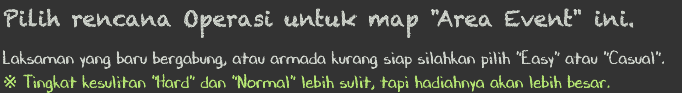
<style>
.page{position:relative;width:682px;height:93px;background:#333333}
.page>*{position:absolute;margin:0}
.t1{font:22px "Chalkduster";color:#d9ded6}
.t2{font:18px/24px "DJBChalkItUp";color:#d9ded6}
.t3{font:18px/24px "TimesNewRomanPSMT";color:#bdef78}
.t4{font:18px/24px "DJBChalkItUp";color:#bdef78}
</style>
<div class="page">
<p class="t1" style="left:3px;top:8px;width:631px;height:31px">Pilih rencana Operasi untuk map "Area Event" ini.</p>
<p class="t2" style="left:2px;top:49px;width:663px;height:44px">Laksaman yang baru bergabung, atau armada kurang siap silahkan pilih "Easy" atau "Casual".<br><span class="t3">※ </span><span class="t4">Tingkat kesulitan "Hard" dan "Normal" lebih sulit, tapi hadiahnya akan lebih besar.</span></p>
</div>
